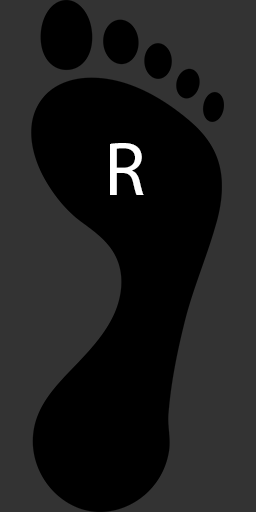
<style>
.page{position:relative;width:256px;height:512px;background:#333333}
.page>*{position:absolute;margin:0}
.t1{font:76.9px "MyriadPro-Regular";color:#ffffff}
</style>
<div class="page">
<p class="t1" style="left:110px;top:143px;width:34px;height:52px">R</p>
</div>
